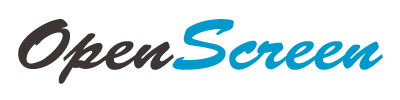
<style>
.page{position:relative;width:400px;height:100px;background:#ffffff}
.page>*{position:absolute;margin:0}
.t1{font:72px "BrushScriptStd";color:#0099cc;scale:1.12 1}
.t2{font:72px "BrushScriptStd";color:#3b3535;scale:1.12 1}
</style>
<div class="page">
<p class="t1" style="left:18px;top:19px;width:365px;height:65px"><span class="t2">Open</span>Screen</p>
</div>
